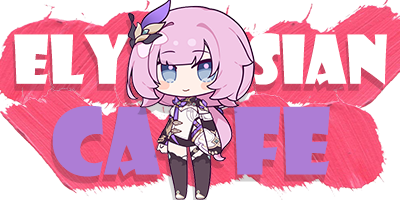
<style>
.page{position:relative;width:400px;height:200px;background:#ffffff}
.page>*{position:absolute;margin:0}
.t1{font:65.5px "ShowcardGothic-Reg";color:#ffffff}
.t2{font:90.1px "ShowcardGothic-Reg";color:#ad7dd5}
</style>
<div class="page">
<p class="t1" style="left:14px;top:33px;width:373px;height:52px">ELY         SIAN</p>
<p class="t2" style="left:52px;top:106px;width:278px;height:71px">CA    FE</p>
</div>
